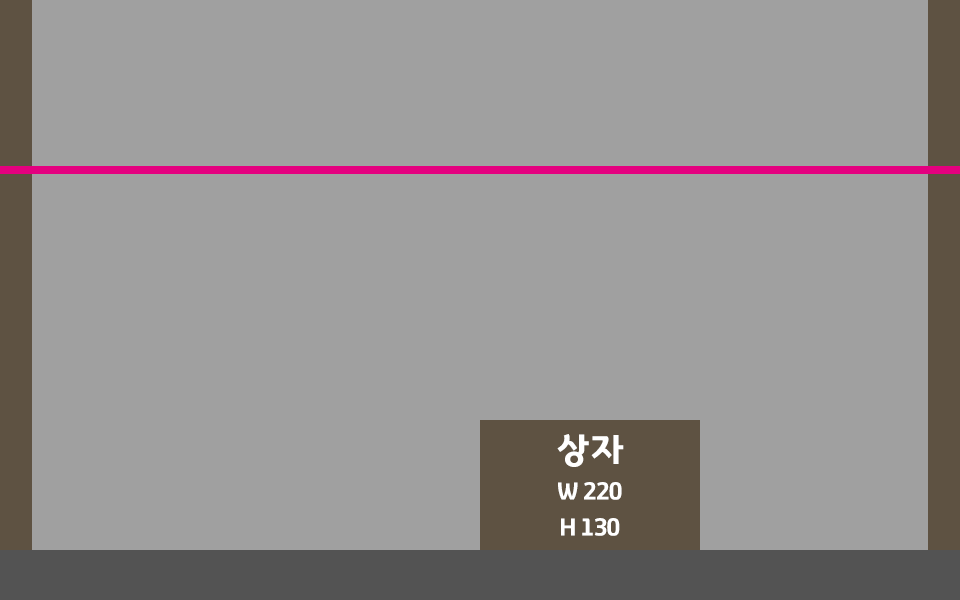
<style>
.page{position:relative;width:960px;height:600px;background:#a0a0a0}
.page>*{position:absolute;margin:0}
.t1{font:24px/36px "GyeonggiTitleV";letter-spacing:-0.05em;color:#ffffff}
.t2{font:36px/12px "GyeonggiTitleV";letter-spacing:-0.05em;color:#ffffff}
</style>
<div class="page">
<p class="t1" style="left:557px;top:434px;width:67px;height:102px;text-align:center"><span class="t2">상자<br><br></span>W 220<br>H 130</p>
</div>
